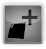
<style>
.page{position:relative;width:46px;height:49px}
.page>*{position:absolute;margin:0}
.t1{font:25px "Tahoma-Bold";color:#363636}
</style>
<div class="page">
<p class="t1" style="left:22px;top:9px;width:16px;height:17px">+</p>
</div>
